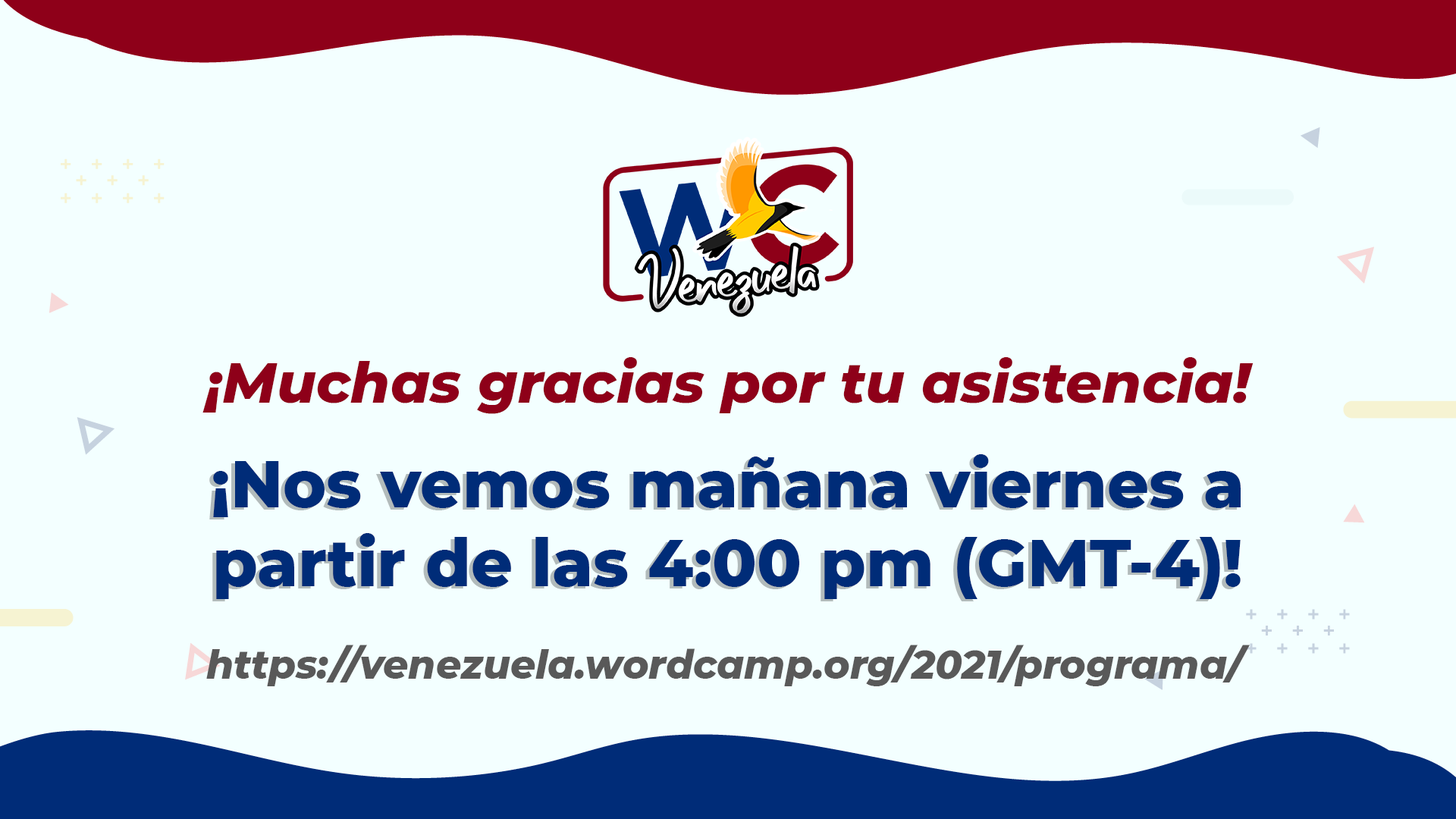
<style>
.page{position:relative;width:1456px;height:819px;background:#f3ffff}
.page>*{position:absolute;margin:0}
.t1{font:56.9px "Montserrat-ExtraBoldItalic";color:#8e0019}
.t2{font:65.2px "Montserrat-ExtraBold";color:#002c78}
.t3{font:39.4px "Montserrat-ExtraBoldItalic";color:#595959}
</style>
<div class="page">
<p class="t1" style="left:202px;top:357px;width:1052px;height:57px">¡Muchas gracias por tu asistencia!</p>
<p class="t2" style="left:213px;top:454px;width:1028px;height:145px;text-align:center">¡Nos vemos mañana viernes a partir de las 4:00 pm (GMT-4)!</p>
<p class="t3" style="left:206px;top:645px;width:1044px;height:41px">https://venezuela.wordcamp.org/2021/programa/</p>
</div>
